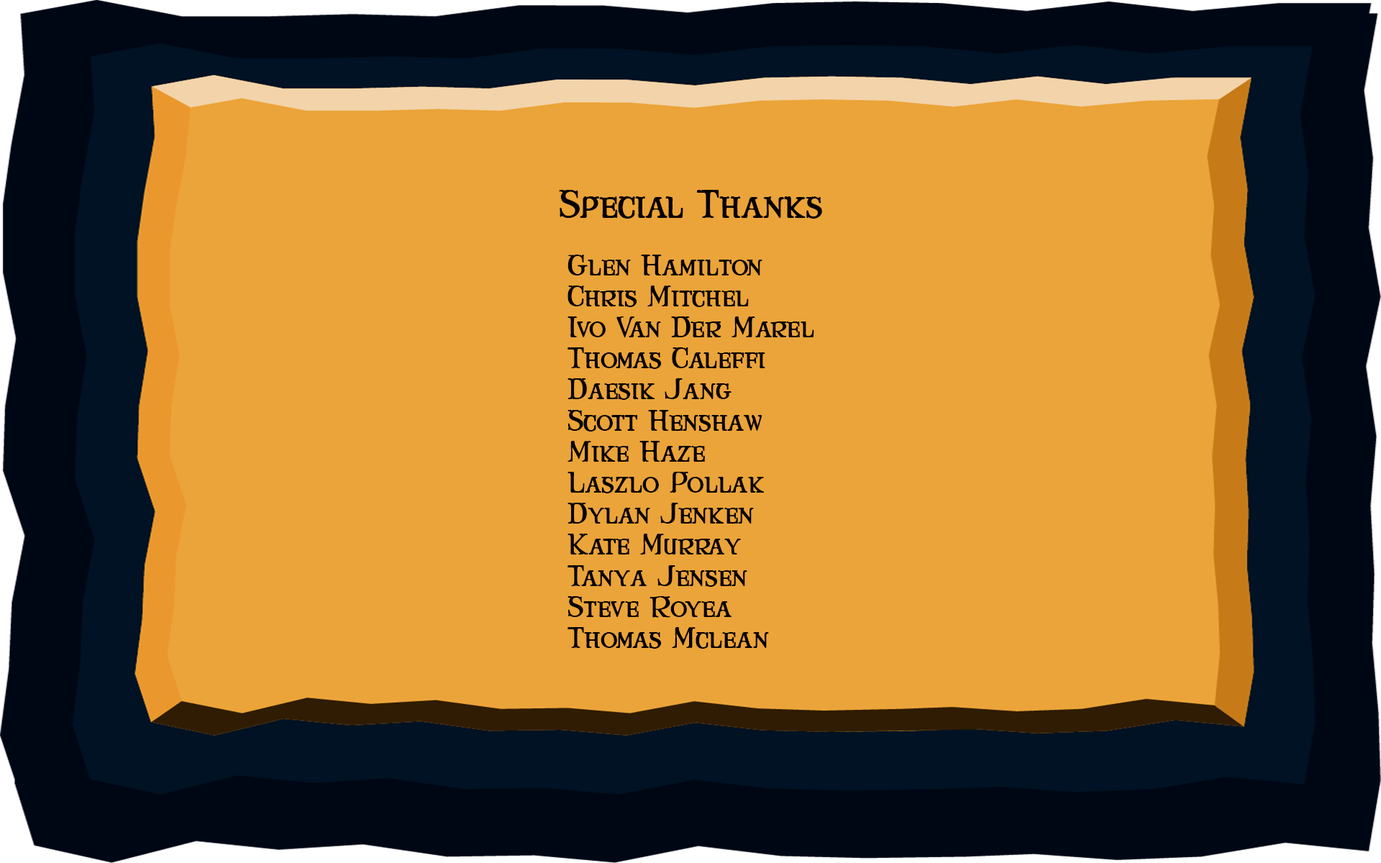
<style>
.page{position:relative;width:1381px;height:863px;background:#eba439}
.page>*{position:absolute;margin:0}
.t1{font:34.5px "MaryJaneCavazos";color:#070102}
.t2{font:25.9px "MaryJaneCavazos";color:#070102}
</style>
<div class="page">
<p class="t1" style="left:559px;top:190px;width:263px;height:29px">Special Thanks</p>
<p class="t2" style="left:568px;top:255px;width:246px;height:394px">Glen Hamilton<br>Chris Mitchel<br>Ivo Van Der Marel<br>Thomas Caleffi<br>Daesik Jang<br>Scott Henshaw<br>Mike Haze<br>Laszlo Pollak<br>Dylan Jenken<br>Kate Murray<br>Tanya Jensen<br>Steve Royea<br>Thomas Mclean</p>
</div>
